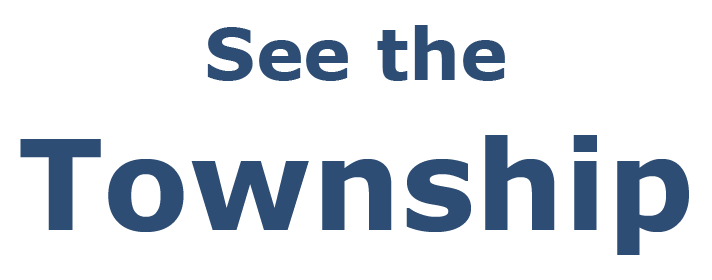
<style>
.page{position:relative;width:712px;height:280px;background:#ffffff}
.page>*{position:absolute;margin:0}
.t1{font:125px "Verdana-Bold";color:#2d4d74}
.t2{font:72px "Verdana-Bold";color:#2d4d74}
</style>
<div class="page">
<p class="t1" style="left:20px;top:25px;width:669px;height:230px;text-align:center"><span class="t2">See the<br></span>Township</p>
</div>
